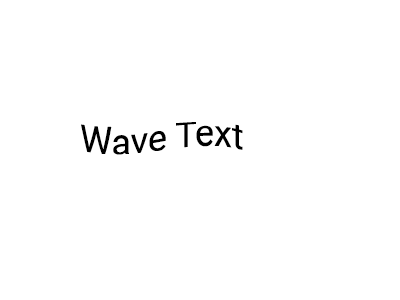
<style>
.page{position:relative;width:400px;height:300px;background:#ffffff}
.page>*{position:absolute;margin:0}
.t1{font:36px "Roboto-Regular";color:#000000}
</style>
<div class="page">
<p class="t1" style="left:81px;top:122px;width:162px;height:33px">Wave Text</p>
</div>
